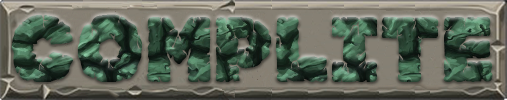
<style>
.page{position:relative;width:507px;height:100px}
.page>*{position:absolute;margin:0}
.t1{font:80px "JFRockSolid"}
</style>
<div class="page">
<p class="t1" style="left:11px;top:14px;width:482px;height:68px">Complite</p>
</div>
